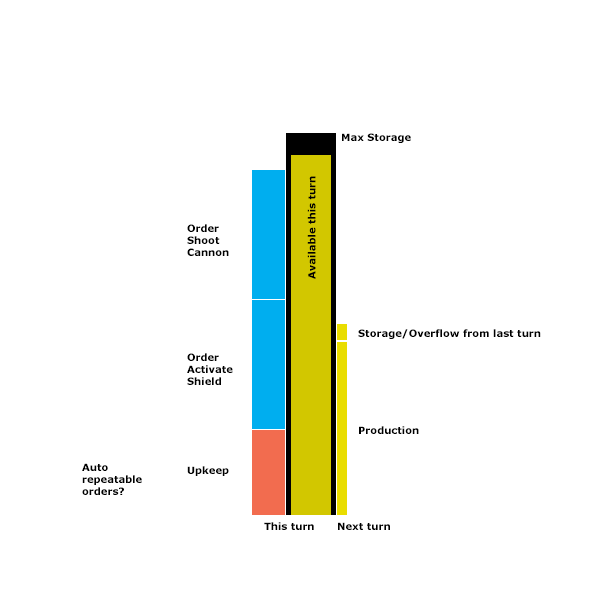
<style>
.page{position:relative;width:600px;height:600px;background:#ffffff}
.page>*{position:absolute;margin:0}
.t1{font:10px "Verdana-Bold";color:#000000}
</style>
<div class="page">
<p class="t1" style="left:342px;top:133px;width:69px;height:10px">Max Storage</p>
<p class="t1" style="left:307px;top:176px;width:9px;height:103px;rotate:-90deg">Available this turn</p>
<p class="t1" style="left:187px;top:224px;width:42px;height:32px">Order<br>Shoot<br>Cannon</p>
<p class="t1" style="left:358px;top:329px;width:183px;height:10px">Storage/Overflow from last turn</p>
<p class="t1" style="left:187px;top:353px;width:46px;height:32px">Order<br>Activate<br>Shield</p>
<p class="t1" style="left:359px;top:426px;width:60px;height:8px">Production</p>
<p class="t1" style="left:82px;top:463px;width:60px;height:32px">Auto <br>repeatable <br>orders?</p>
<p class="t1" style="left:187px;top:466px;width:42px;height:10px">Upkeep</p>
<p class="t1" style="left:264px;top:522px;width:50px;height:8px">This turn</p>
<p class="t1" style="left:338px;top:522px;width:52px;height:8px">Next turn</p>
</div>
